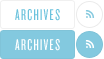
<style>
.page{position:relative;width:104px;height:59px;background:#ffffff}
.page>*{position:absolute;margin:0}
.t1{font:16px "Knockout-HTF27-JuniorBantamwt";letter-spacing:0.08em;color:#6bc2dd;text-transform:uppercase}
.t2{font:16px "Knockout-HTF27-JuniorBantamwt";letter-spacing:0.08em;color:#ffffff;text-transform:uppercase}
</style>
<div class="page">
<p class="t1" style="left:15px;top:9px;width:45px;height:12px">ARCHIVES</p>
<p class="t2" style="left:15px;top:39px;width:45px;height:12px">ARCHIVES</p>
</div>
